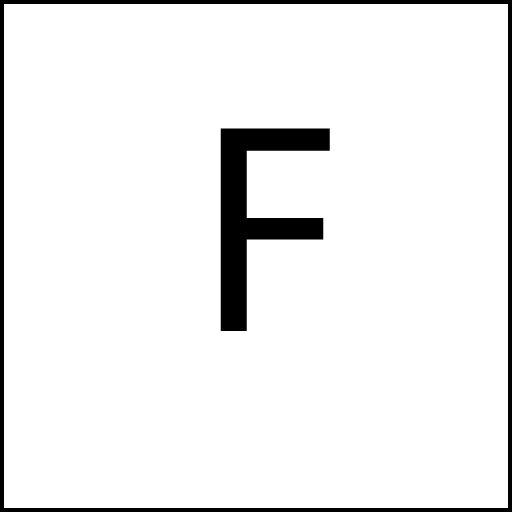
<style>
.page{position:relative;width:512px;height:512px;background:#ffffff}
.page>*{position:absolute;margin:0}
.t1{font:300px "MyriadPro-Regular";color:#000000}
</style>
<div class="page">
<p class="t1" style="left:220px;top:128px;width:110px;height:203px">F</p>
</div>
